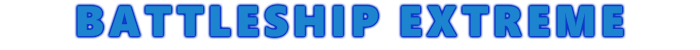
<style>
.page{position:relative;width:700px;height:50px;background:#ffffff}
.page>*{position:absolute;margin:0}
.t1{font:42.5px "SegoeUIBlack";letter-spacing:0.12em;color:#1d85d0}
</style>
<div class="page">
<p class="t1" style="left:77px;top:5px;width:546px;height:32px">BATTLESHIP EXTREME</p>
</div>
